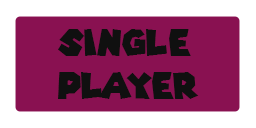
<style>
.page{position:relative;width:256px;height:128px;background:#891151}
.page>*{position:absolute;margin:0}
.t1{font:36px "SuperMarioGalaxy";color:#101010}
</style>
<div class="page">
<p class="t1" style="left:58px;top:29px;width:141px;height:70px">SINGLE <br>PLAYER</p>
</div>
